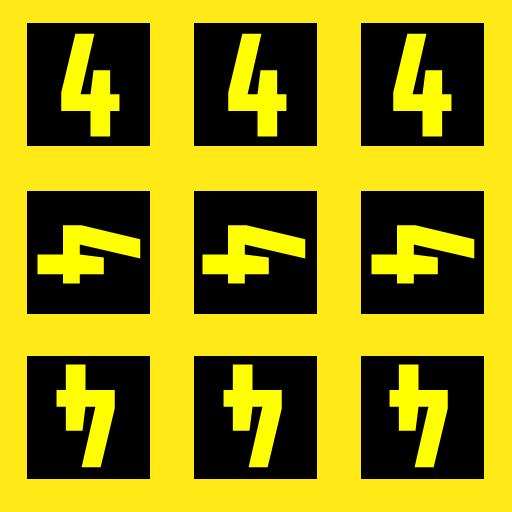
<style>
.page{position:relative;width:512px;height:512px;background:#ffea17}
.page>*{position:absolute;margin:0}
.t1{font:150px "Share-BoldOSF";color:#ffff00}
</style>
<div class="page">
<p class="t1" style="left:61px;top:33px;width:59px;height:104px">4</p>
<p class="t1" style="left:228px;top:33px;width:59px;height:104px">4</p>
<p class="t1" style="left:393px;top:33px;width:59px;height:104px">4</p>
<p class="t1" style="left:37px;top:225px;width:104px;height:59px;rotate:90deg">4</p>
<p class="t1" style="left:202px;top:225px;width:104px;height:59px;rotate:90deg">4</p>
<p class="t1" style="left:371px;top:225px;width:104px;height:59px;rotate:90deg">4</p>
<p class="t1" style="left:56px;top:364px;width:59px;height:104px;rotate:-180deg">4</p>
<p class="t1" style="left:223px;top:364px;width:59px;height:104px;rotate:-180deg">4</p>
<p class="t1" style="left:389px;top:364px;width:59px;height:104px;rotate:-180deg">4</p>
</div>
